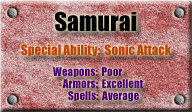
<style>
.page{position:relative;width:192px;height:112px}
.page>*{position:absolute;margin:0}
.t1{font:24px "Impact";color:#000000}
.t2{font:13px "Impact";color:#be4208}
.t3{font:11px "Impact";color:#4a006c}
</style>
<div class="page">
<p class="t1" style="left:55px;top:11px;width:82px;height:21px">Samurai</p>
<p class="t2" style="left:21px;top:44px;width:150px;height:13px">Special Ability:  Sonic Attack</p>
<p class="t3" style="left:53px;top:67px;width:69px;height:10px">Weapons:  Poor</p>
<p class="t3" style="left:62px;top:79px;width:81px;height:9px">Armors:  Excellent</p>
<p class="t3" style="left:68px;top:91px;width:71px;height:11px">Spells:  Average</p>
</div>
